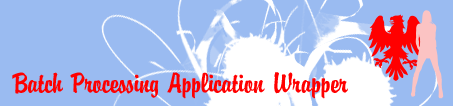
<style>
.page{position:relative;width:453px;height:106px;background:#9abbf1}
.page>*{position:absolute;margin:0}
.t1{font:30px "Brandyscript";color:#ff0000}
</style>
<div class="page">
<p class="t1" style="left:12px;top:72px;width:336px;height:27px">Batch Processing Application Wrapper</p>
</div>
